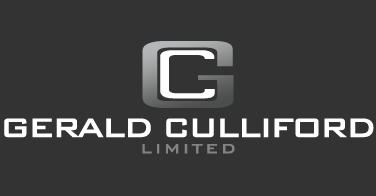
<style>
.page{position:relative;width:376px;height:196px;background:#333333}
.page>*{position:absolute;margin:0}
.t1{font:36px "BankGothicBold";letter-spacing:-0.08em;color:#ffffff}
.t2{font:18px "BankGothicBold";letter-spacing:0.12em;color:#818384}
</style>
<div class="page">
<p class="t1" style="left:4px;top:118px;width:370px;height:20px">GERALD CULLIFORD</p>
<p class="t2" style="left:142px;top:144px;width:93px;height:10px">LIMITED</p>
</div>
